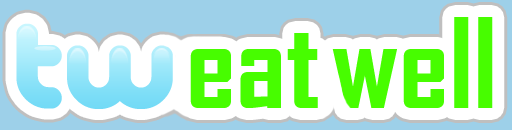
<style>
.page{position:relative;width:512px;height:130px;background:#ffffff}
.page>*{position:absolute;margin:0}
.t1{font:119.5px "AgencyFB-Bold";color:#47fd00;scale:1.05 1}
.t2{font:125px "PicoBlackAl"}
</style>
<div class="page">
<p class="t1" style="left:190px;top:17px;width:303px;height:91px">eat well</p>
<p class="t1" style="left:190px;top:17px;width:303px;height:91px">eat well</p>
<p class="t2" style="left:16px;top:23px;width:157px;height:86px">tw</p>
<p class="t2" style="left:16px;top:23px;width:157px;height:86px">tw</p>
</div>
